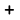
<style>
.page{position:relative;width:20px;height:20px;background:#ffffff}
.page>*{position:absolute;margin:0}
.t1{font:18px "CourierNewPS-BoldMT";letter-spacing:-0.005em;color:#000000}
</style>
<div class="page">
<p class="t1" style="left:4px;top:5px;width:10px;height:10px">+</p>
</div>
